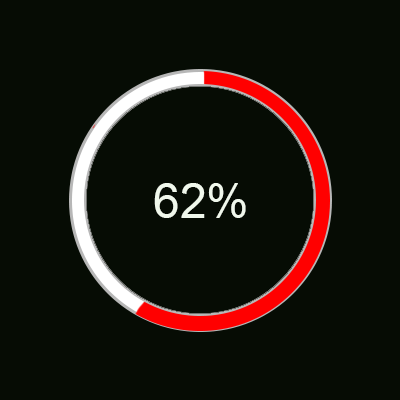
<style>
.page{position:relative;width:400px;height:400px;background:#060c04}
.page>*{position:absolute;margin:0}
.t1{font:48px "ArialMT";color:#f0f8ec}
</style>
<div class="page">
<p class="t1" style="left:154px;top:183px;width:92px;height:35px">62%</p>
</div>
